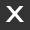
<style>
.page{position:relative;width:30px;height:30px;background:#333333}
.page>*{position:absolute;margin:0}
.t1{font:22px "Montserrat-Regular";color:#ffffff;scale:1.27 1}
</style>
<div class="page">
<p class="t1" style="left:5px;top:6px;width:19px;height:16px">X</p>
</div>
